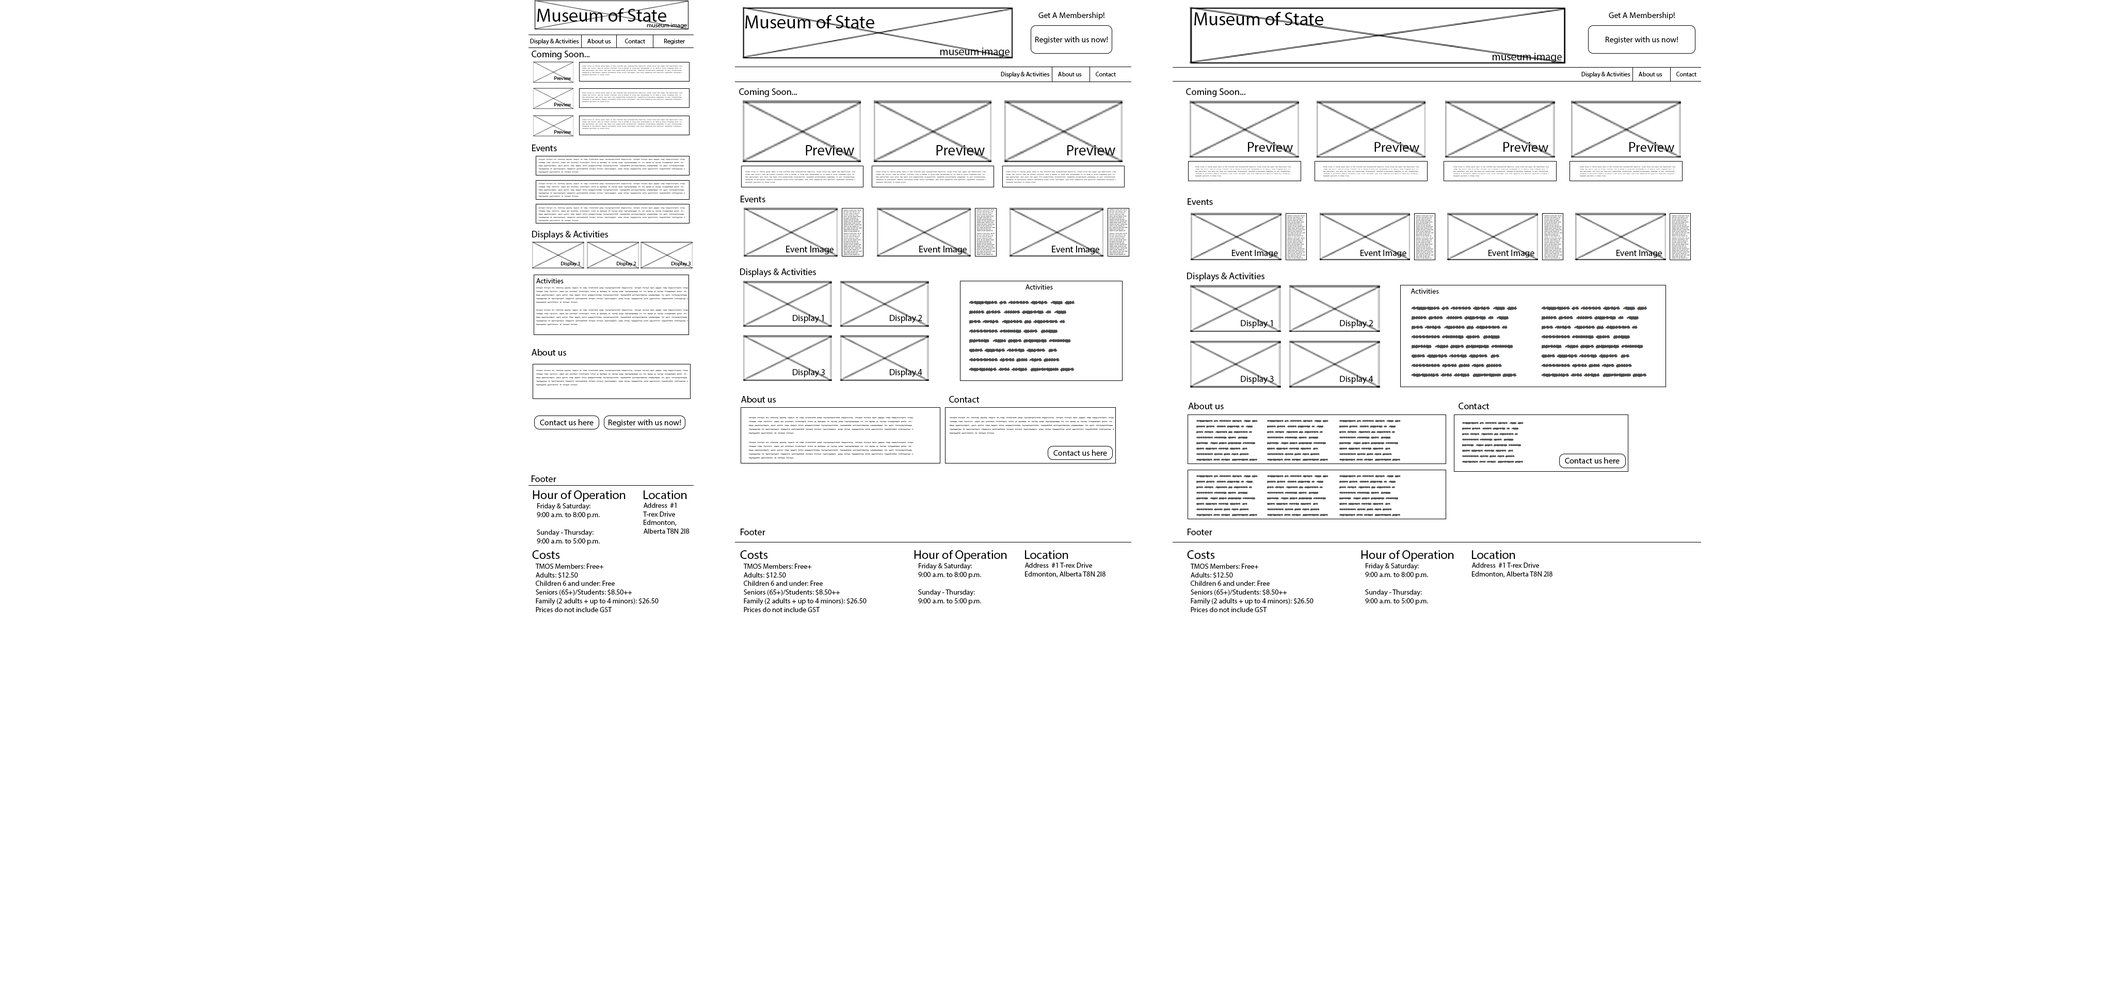
<style>
.page{position:relative;width:2114px;height:991px;background:#ffffff}
.page>*{position:absolute;margin:0}
.t1{font:18.6px "MyriadPro-Regular";color:#000000}
.t2{font:8.3px "MyriadPro-Regular";color:#000000}
.t3{font:6.2px "MyriadPro-Regular";color:#000000}
.t4{font:9.3px "MyriadPro-Regular";color:#000000}
.t5{font:10.9px "MyriadPro-Regular";color:#000000}
.t6{font:5.2px "MyriadPro-Regular";color:#000000}
.t7{font:9.5px "MyriadPro-Regular";color:#000000}
.t8{font:15.2px "MyriadPro-Regular";color:#000000}
.t9{font:14px "MyriadPro-Regular";color:#000000}
.t10{font:9px "MyriadPro-Regular";color:#000000}
.t11{font:7.2px "MyriadPro-Regular";color:#000000}
.t12{font:7.4px "MyriadPro-Regular";color:#000000}
.t13{font:8.8px "MyriadPro-Regular";color:#000000}
.t14{font:8.4px "MyriadPro-Regular";color:#000000}
.t15{font:12.4px "MyriadPro-Regular";color:#000000}
</style>
<div class="page">
<p class="t1" style="left:537px;top:8px;width:129px;height:14px">Museum of State</p>
<p class="t1" style="left:745px;top:15px;width:129px;height:13px">Museum of State</p>
<p class="t2" style="left:1039px;top:12px;width:66px;height:8px">Get A Membership!</p>
<p class="t1" style="left:1194px;top:12px;width:129px;height:13px">Museum of State</p>
<p class="t2" style="left:1609px;top:12px;width:66px;height:8px">Get A Membership!</p>
<p class="t3" style="left:647px;top:23px;width:40px;height:5px">museum image</p>
<p class="t3" style="left:530px;top:39px;width:49px;height:6px">Display &amp; Activities</p>
<p class="t3" style="left:587px;top:39px;width:24px;height:4px">About us</p>
<p class="t3" style="left:625px;top:39px;width:20px;height:4px">Contact</p>
<p class="t3" style="left:664px;top:39px;width:21px;height:5px">Register</p>
<p class="t2" style="left:1035px;top:36px;width:73px;height:8px">Register with us now!</p>
<p class="t2" style="left:1606px;top:36px;width:73px;height:8px">Register with us now!</p>
<p class="t4" style="left:532px;top:51px;width:58px;height:8px">Coming Soon...</p>
<p class="t5" style="left:940px;top:47px;width:70px;height:10px">museum image</p>
<p class="t5" style="left:1492px;top:53px;width:70px;height:9px">museum image</p>
<p class="t6" style="left:554px;top:76px;width:17px;height:4px">Preview</p>
<p class="t3" style="left:1001px;top:72px;width:49px;height:6px">Display &amp; Activities</p>
<p class="t3" style="left:1058px;top:72px;width:24px;height:4px">About us</p>
<p class="t3" style="left:1096px;top:72px;width:20px;height:4px">Contact</p>
<p class="t3" style="left:1582px;top:72px;width:49px;height:6px">Display &amp; Activities</p>
<p class="t3" style="left:1639px;top:72px;width:24px;height:4px">About us</p>
<p class="t3" style="left:1677px;top:72px;width:20px;height:4px">Contact</p>
<p class="t4" style="left:739px;top:88px;width:58px;height:9px">Coming Soon...</p>
<p class="t7" style="left:1186px;top:88px;width:60px;height:9px">Coming Soon...</p>
<p class="t6" style="left:554px;top:103px;width:17px;height:3px">Preview</p>
<p class="t6" style="left:554px;top:130px;width:17px;height:4px">Preview</p>
<p class="t4" style="left:532px;top:145px;width:25px;height:6px">Events</p>
<p class="t8" style="left:806px;top:145px;width:48px;height:10px">Preview</p>
<p class="t8" style="left:936px;top:145px;width:49px;height:10px">Preview</p>
<p class="t8" style="left:1067px;top:145px;width:48px;height:10px">Preview</p>
<p class="t9" style="left:1248px;top:142px;width:45px;height:10px">Preview</p>
<p class="t9" style="left:1375px;top:142px;width:44px;height:10px">Preview</p>
<p class="t9" style="left:1504px;top:142px;width:45px;height:10px">Preview</p>
<p class="t9" style="left:1630px;top:142px;width:44px;height:10px">Preview</p>
<p class="t4" style="left:741px;top:196px;width:24px;height:6px">Events</p>
<p class="t7" style="left:1188px;top:198px;width:25px;height:7px">Events</p>
<p class="t4" style="left:532px;top:231px;width:76px;height:9px">Displays &amp; Activities</p>
<p class="t4" style="left:786px;top:246px;width:48px;height:8px">Event Image</p>
<p class="t4" style="left:919px;top:246px;width:48px;height:8px">Event Image</p>
<p class="t4" style="left:1052px;top:246px;width:47px;height:8px">Event Image</p>
<p class="t10" style="left:1232px;top:250px;width:46px;height:8px">Event Image</p>
<p class="t10" style="left:1361px;top:250px;width:46px;height:8px">Event Image</p>
<p class="t10" style="left:1489px;top:250px;width:46px;height:8px">Event Image</p>
<p class="t10" style="left:1617px;top:250px;width:45px;height:8px">Event Image</p>
<p class="t6" style="left:561px;top:261px;width:19px;height:6px">Display 1</p>
<p class="t6" style="left:617px;top:261px;width:19px;height:6px">Display 2</p>
<p class="t6" style="left:672px;top:261px;width:19px;height:6px">Display 3</p>
<p class="t4" style="left:740px;top:268px;width:76px;height:9px">Displays &amp; Activities</p>
<p class="t11" style="left:536px;top:278px;width:28px;height:5px">Activities</p>
<p class="t7" style="left:1187px;top:273px;width:78px;height:9px">Displays &amp; Activities</p>
<p class="t11" style="left:1026px;top:284px;width:27px;height:6px">Activities</p>
<p class="t12" style="left:1411px;top:289px;width:28px;height:5px">Activities</p>
<p class="t13" style="left:793px;top:314px;width:31px;height:9px">Display 1</p>
<p class="t13" style="left:890px;top:314px;width:32px;height:9px">Display 2</p>
<p class="t10" style="left:1241px;top:320px;width:32px;height:8px">Display 1</p>
<p class="t10" style="left:1340px;top:320px;width:33px;height:8px">Display 2</p>
<p class="t4" style="left:532px;top:349px;width:34px;height:7px">About us</p>
<p class="t13" style="left:793px;top:369px;width:32px;height:8px">Display 3</p>
<p class="t13" style="left:890px;top:369px;width:32px;height:8px">Display 4</p>
<p class="t10" style="left:1241px;top:375px;width:33px;height:9px">Display 3</p>
<p class="t10" style="left:1340px;top:375px;width:34px;height:9px">Display 4</p>
<p class="t4" style="left:741px;top:396px;width:35px;height:7px">About us</p>
<p class="t4" style="left:949px;top:396px;width:31px;height:7px">Contact</p>
<p class="t7" style="left:1188px;top:403px;width:36px;height:6px">About us</p>
<p class="t7" style="left:1459px;top:403px;width:31px;height:6px">Contact</p>
<p class="t2" style="left:540px;top:419px;width:54px;height:6px">Contact us here</p>
<p class="t2" style="left:609px;top:419px;width:72px;height:8px">Register with us now!</p>
<p class="t2" style="left:1054px;top:450px;width:53px;height:6px">Contact us here</p>
<p class="t14" style="left:1565px;top:457px;width:55px;height:7px">Contact us here</p>
<p class="t4" style="left:532px;top:475px;width:24px;height:7px">Footer</p>
<p class="t15" style="left:533px;top:490px;width:93px;height:12px">Hour of Operation</p>
<p class="t15" style="left:644px;top:490px;width:43px;height:9px">Location</p>
<p class="t11" style="left:537px;top:503px;width:63px;height:42px">Friday &amp; Saturday: <br>9:00 a.m. to 8:00 p.m.<br><br>Sunday - Thursday: <br>9:00 a.m. to 5:00 p.m.</p>
<p class="t11" style="left:643px;top:503px;width:47px;height:31px">Address  #1 <br>T-rex Drive<br>Edmonton, <br>Alberta T8N 2I8</p>
<p class="t4" style="left:741px;top:529px;width:24px;height:6px">Footer</p>
<p class="t4" style="left:1188px;top:529px;width:24px;height:6px">Footer</p>
<p class="t15" style="left:532px;top:550px;width:28px;height:9px">Costs</p>
<p class="t15" style="left:740px;top:550px;width:28px;height:9px">Costs</p>
<p class="t15" style="left:914px;top:550px;width:93px;height:12px">Hour of Operation</p>
<p class="t15" style="left:1025px;top:550px;width:43px;height:9px">Location</p>
<p class="t15" style="left:1187px;top:550px;width:28px;height:9px">Costs</p>
<p class="t15" style="left:1361px;top:550px;width:93px;height:12px">Hour of Operation</p>
<p class="t15" style="left:1472px;top:550px;width:43px;height:9px">Location</p>
<p class="t11" style="left:535px;top:564px;width:124px;height:48px">TMOS Members: Free+<br>Adults: $12.50<br>Children 6 and under: Free<br>Seniors (65+)/Students: $8.50++<br>Family (2 adults + up to 4 minors): $26.50<br>Prices do not include GST</p>
<p class="t11" style="left:743px;top:564px;width:124px;height:48px">TMOS Members: Free+<br>Adults: $12.50<br>Children 6 and under: Free<br>Seniors (65+)/Students: $8.50++<br>Family (2 adults + up to 4 minors): $26.50<br>Prices do not include GST</p>
<p class="t11" style="left:918px;top:563px;width:63px;height:42px">Friday &amp; Saturday: <br>9:00 a.m. to 8:00 p.m.<br><br>Sunday - Thursday: <br>9:00 a.m. to 5:00 p.m.</p>
<p class="t11" style="left:1025px;top:563px;width:81px;height:15px">Address  #1 T-rex Drive<br>Edmonton, Alberta T8N 2I8</p>
<p class="t11" style="left:1190px;top:564px;width:124px;height:48px">TMOS Members: Free+<br>Adults: $12.50<br>Children 6 and under: Free<br>Seniors (65+)/Students: $8.50++<br>Family (2 adults + up to 4 minors): $26.50<br>Prices do not include GST</p>
<p class="t11" style="left:1365px;top:563px;width:63px;height:42px">Friday &amp; Saturday: <br>9:00 a.m. to 8:00 p.m.<br><br>Sunday - Thursday: <br>9:00 a.m. to 5:00 p.m.</p>
<p class="t11" style="left:1472px;top:563px;width:81px;height:15px">Address  #1 T-rex Drive<br>Edmonton, Alberta T8N 2I8</p>
</div>
